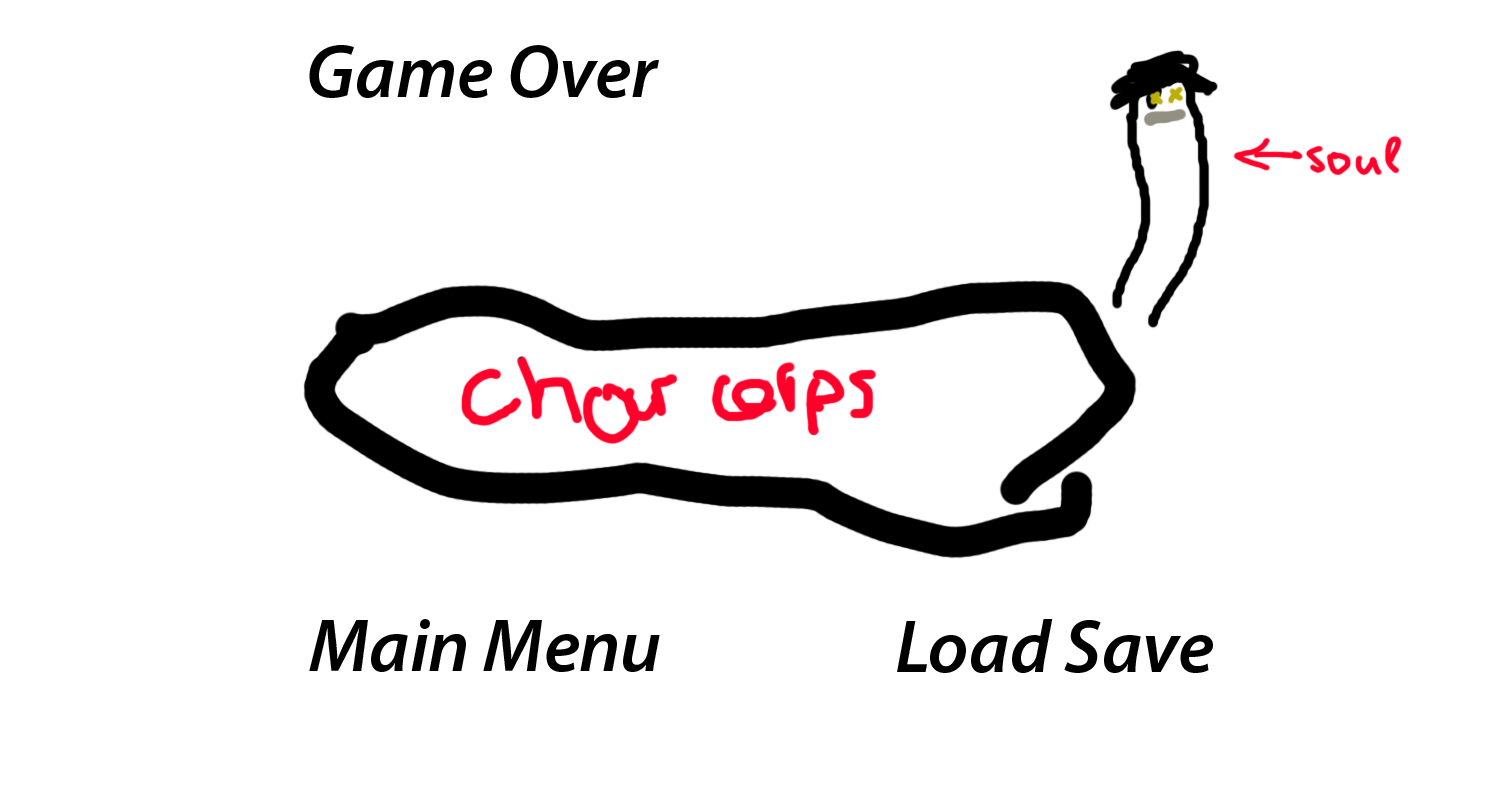
<style>
.page{position:relative;width:1489px;height:800px;background:#ffffff}
.page>*{position:absolute;margin:0}
.t1{font:75px "MyriadPro-SemiboldIt";color:#000000}
</style>
<div class="page">
<p class="t1" style="left:309px;top:45px;width:350px;height:53px">Game Over</p>
<p class="t1" style="left:309px;top:619px;width:351px;height:53px">Main Menu</p>
<p class="t1" style="left:897px;top:619px;width:316px;height:54px">Load Save</p>
</div>
